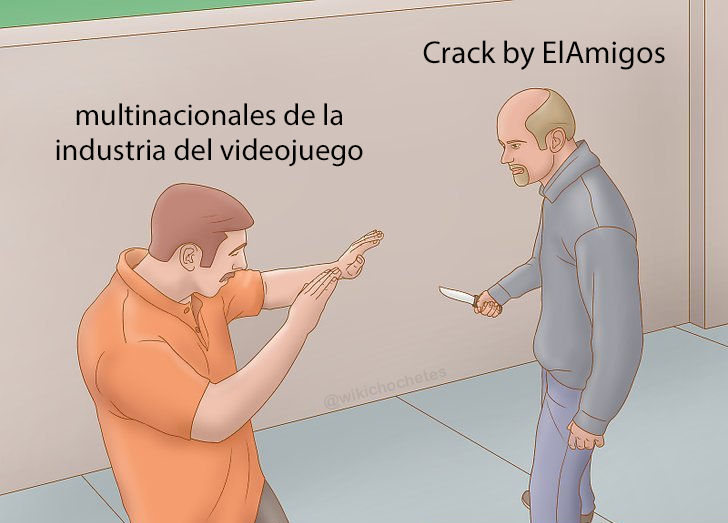
<style>
.page{position:relative;width:728px;height:523px}
.page>*{position:absolute;margin:0}
.t1{font:31.8px "MyriadPro-Regular";color:#000000}
.t2{font:30.5px "MyriadPro-Regular";color:#000000}
</style>
<div class="page">
<p class="t1" style="left:423px;top:40px;width:242px;height:30px">Crack by ElAmigos</p>
<p class="t2" style="left:56px;top:103px;width:307px;height:64px;text-align:center">multinacionales de la<br>industria del videojuego</p>
</div>
